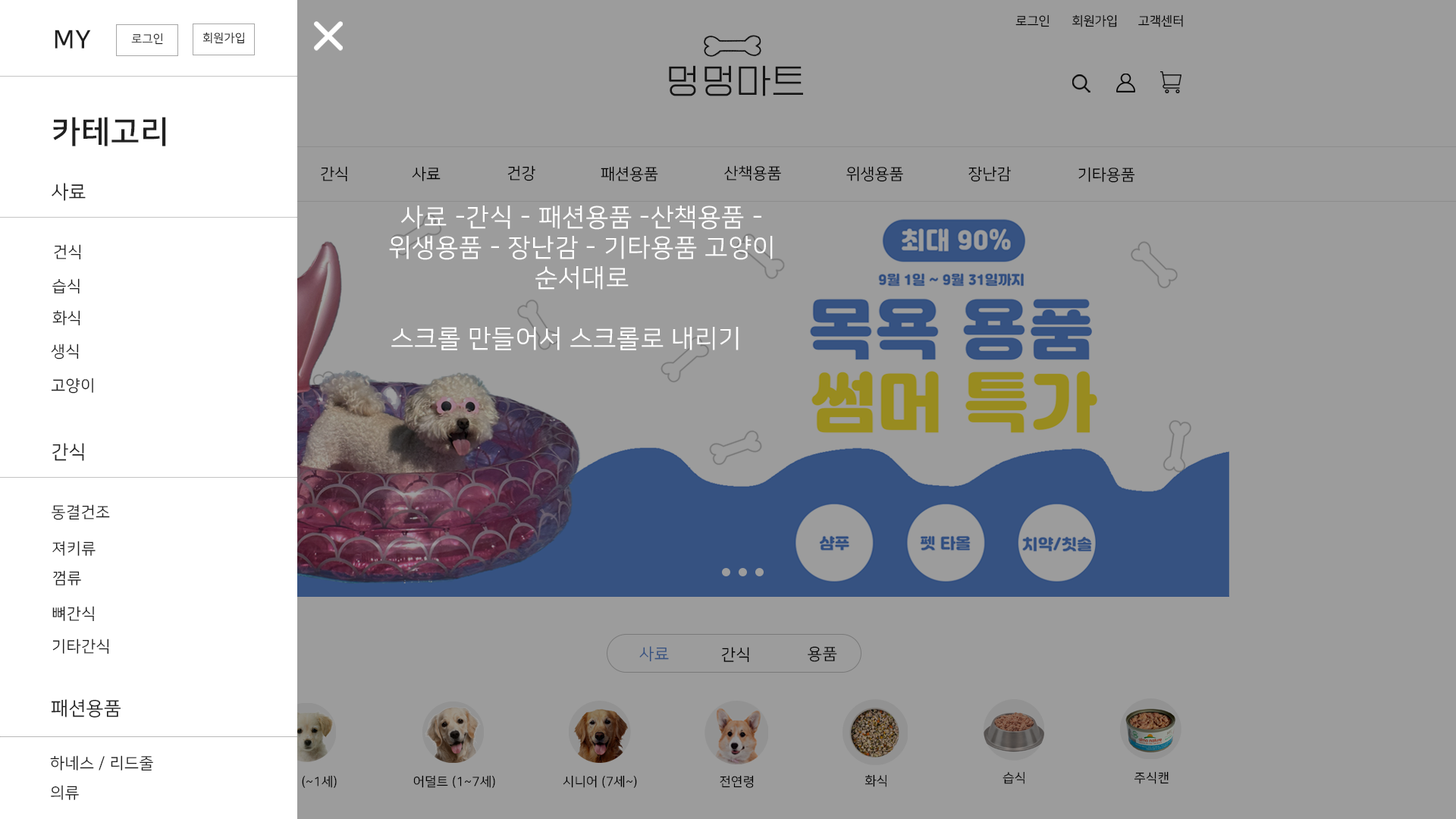
<style>
.page{position:relative;width:1456px;height:819px;background:#9c9c9c}
.page>*{position:absolute;margin:0}
.t1{font:12.6px "NanumSquareR";color:#000000}
.t2{font:25.3px "NanumSquareB";letter-spacing:0.025em;color:#202020}
.t3{font:11.6px "NanumSquareR";letter-spacing:0.025em;color:#202020}
.t4{font:34.8px "EF_watermelonSalad";letter-spacing:0.025em;color:#202020}
.t5{font:31.6px "NanumSquareB";letter-spacing:0.025em;color:#202020}
.t6{font:15.8px "NanumSquareR";color:#000000}
.t7{font:19px "NanumSquareR";letter-spacing:0.025em;color:#202020}
.t8{font:25.3px "NanumSquareR";letter-spacing:0.025em;color:#ffffff}
.t9{font:15.8px "NanumSquareR";letter-spacing:0.025em;color:#202020}
.t10{font:16.2px "NanumSquareR";letter-spacing:0.025em;color:#365281}
.t11{font:16.2px "NanumSquareR";letter-spacing:0.025em;color:#000000}
.t12{font:12.6px "NanumSquareR";letter-spacing:0.025em;color:#000000}
</style>
<div class="page">
<p class="t1" style="left:1015px;top:14px;width:35px;height:13px">로그인</p>
<p class="t1" style="left:1072px;top:14px;width:45px;height:13px">회원가입</p>
<p class="t1" style="left:1138px;top:14px;width:45px;height:13px">고객센터</p>
<p class="t2" style="left:55px;top:30px;width:36px;height:19px">MY</p>
<p class="t3" style="left:131px;top:33px;width:32px;height:12px">로그인</p>
<p class="t3" style="left:202px;top:32px;width:42px;height:12px">회원가입</p>
<p class="t4" style="left:669px;top:65px;width:134px;height:31px">멍멍마트</p>
<p class="t5" style="left:53px;top:117px;width:113px;height:29px">카테고리</p>
<p class="t6" style="left:321px;top:166px;width:26px;height:16px">간식</p>
<p class="t6" style="left:412px;top:166px;width:29px;height:15px">사료</p>
<p class="t6" style="left:507px;top:165px;width:28px;height:16px">건강</p>
<p class="t6" style="left:601px;top:166px;width:57px;height:16px">패션용품</p>
<p class="t6" style="left:724px;top:165px;width:57px;height:16px">산책용품</p>
<p class="t6" style="left:846px;top:166px;width:57px;height:16px">위생용품</p>
<p class="t6" style="left:968px;top:166px;width:43px;height:16px">장난감</p>
<p class="t6" style="left:1078px;top:167px;width:57px;height:16px">기타용품</p>
<p class="t7" style="left:52px;top:183px;width:34px;height:18px">사료</p>
<p class="t8" style="left:389px;top:206px;width:384px;height:144px;text-align:center">사료 -간식 - 패션용품 -산책용품 -<br>위생용품 - 장난감 - 기타용품 고양이<br>순서대로<br><br>스크롤 만들어서 스크롤로 내리기</p>
<p class="t9" style="left:54px;top:244px;width:27px;height:16px">건식</p>
<p class="t9" style="left:52px;top:278px;width:28px;height:16px">습식</p>
<p class="t9" style="left:52px;top:310px;width:28px;height:16px">화식</p>
<p class="t9" style="left:51px;top:344px;width:28px;height:15px">생식</p>
<p class="t9" style="left:51px;top:378px;width:42px;height:16px">고양이</p>
<p class="t7" style="left:52px;top:443px;width:32px;height:18px">간식</p>
<p class="t9" style="left:52px;top:504px;width:58px;height:16px">동결건조</p>
<p class="t9" style="left:52px;top:541px;width:44px;height:15px">져키류</p>
<p class="t9" style="left:53px;top:570px;width:28px;height:15px">껌류</p>
<p class="t9" style="left:52px;top:606px;width:42px;height:15px">뼈간식</p>
<p class="t9" style="left:52px;top:639px;width:57px;height:15px">기타간식</p>
<p class="t10" style="left:639px;top:646px;width:30px;height:16px">사료</p>
<p class="t11" style="left:721px;top:647px;width:28px;height:16px">간식</p>
<p class="t11" style="left:808px;top:646px;width:29px;height:16px">용품</p>
<p class="t7" style="left:51px;top:699px;width:70px;height:19px">패션용품</p>
<p class="t9" style="left:50px;top:755px;width:103px;height:16px">하네스 / 리드줄</p>
<p class="t12" style="left:1003px;top:771px;width:21px;height:13px">습식</p>
<p class="t12" style="left:1134px;top:771px;width:35px;height:13px">주식캔</p>
<p class="t9" style="left:51px;top:785px;width:28px;height:15px">의류</p>
<p class="t12" style="left:413px;top:775px;width:82px;height:13px">어덜트 (1~7세)</p>
<p class="t12" style="left:563px;top:775px;width:74px;height:13px">시니어 (7세~)</p>
<p class="t12" style="left:720px;top:775px;width:34px;height:13px">전연령</p>
<p class="t12" style="left:864px;top:774px;width:22px;height:13px">화식</p>
</div>
